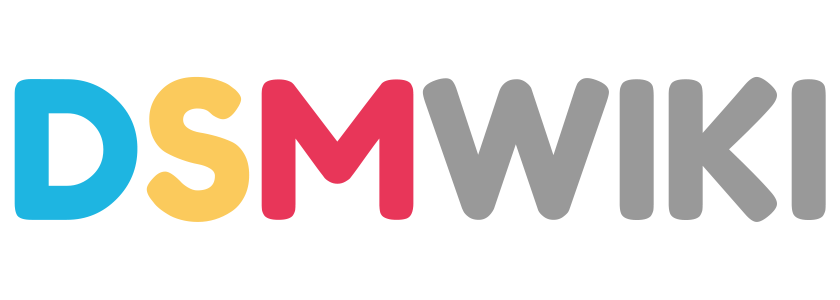
<style>
.page{position:relative;width:840px;height:300px;background:#ffffff}
.page>*{position:absolute;margin:0}
.t1{font:191.7px "FredokaOne-Regular";color:#999999}
.t2{font:191.7px "FredokaOne-Regular";color:#1eb5e1}
.t3{font:191.7px "FredokaOne-Regular";color:#fbca5c}
.t4{font:191.7px "FredokaOne-Regular";color:#e83659}
</style>
<div class="page">
<p class="t1" style="left:14px;top:76px;width:812px;height:146px"><span class="t2">D</span><span class="t3">S</span><span class="t4">M</span>WIKI</p>
</div>
